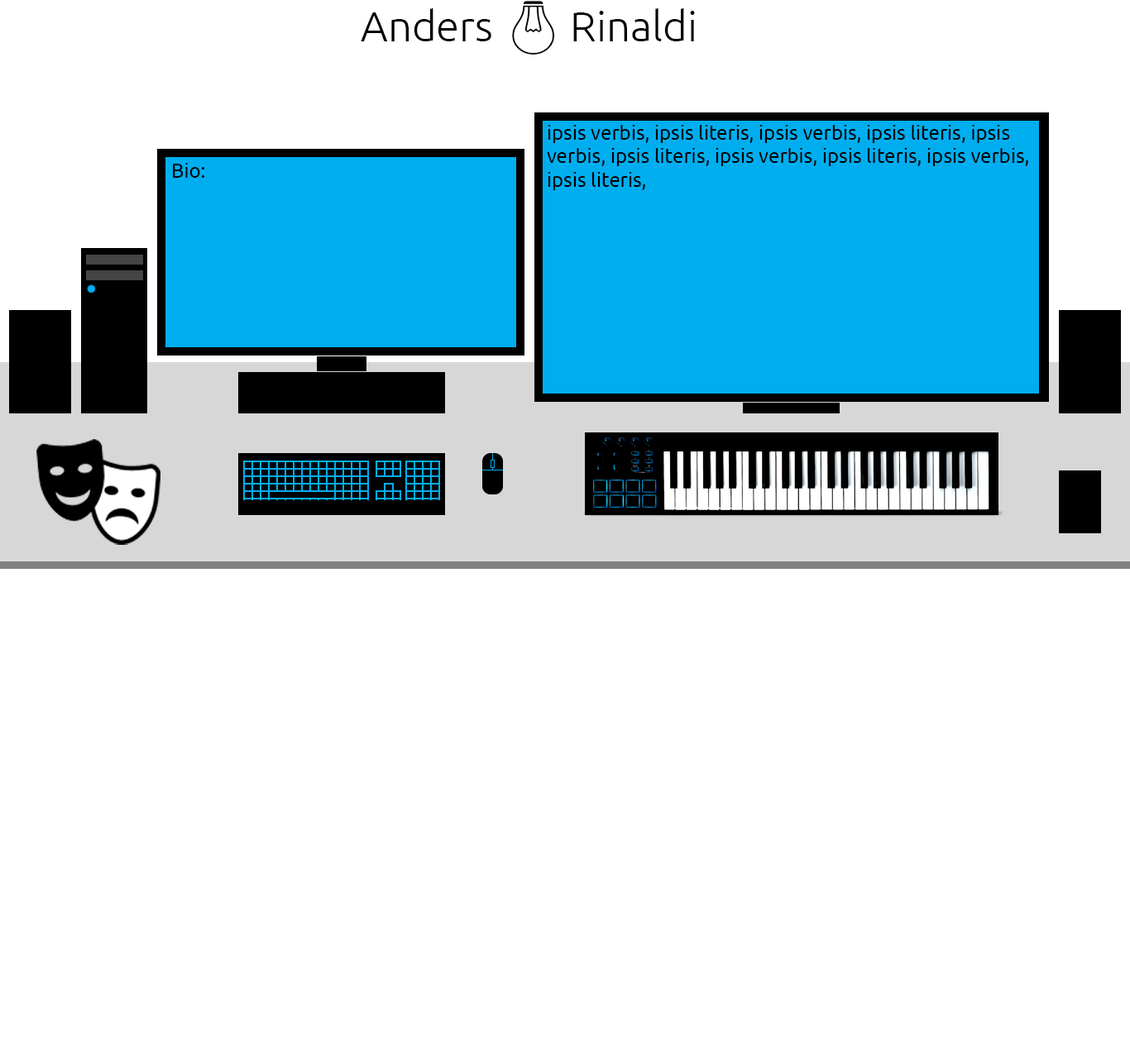
<style>
.page{position:relative;width:1130px;height:1055px;background:#ffffff}
.page>*{position:absolute;margin:0}
.t1{font:42.2px "Ubuntu-Light";color:#000000}
.t2{font:19.9px "Ubuntu";color:#000000}
</style>
<div class="page">
<p class="t1" style="left:361px;top:8px;width:334px;height:33px">Anders        Rinaldi</p>
<p class="t2" style="left:547px;top:125px;width:481px;height:65px">ipsis verbis, ipsis literis, ipsis verbis, ipsis literis, ipsis verbis, ipsis literis, ipsis verbis, ipsis literis, ipsis verbis, ipsis literis,</p>
<p class="t2" style="left:173px;top:163px;width:32px;height:15px">Bio:</p>
</div>
